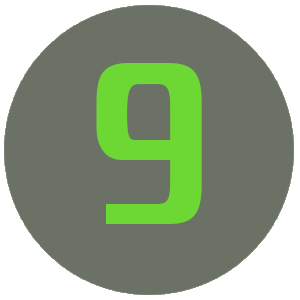
<style>
.page{position:relative;width:300px;height:300px;background:#6b7265}
.page>*{position:absolute;margin:0}
.t1{font:200px "Unispace-Bold";color:#6dd733}
</style>
<div class="page">
<p class="t1" style="left:96px;top:63px;width:106px;height:161px">9</p>
</div>
